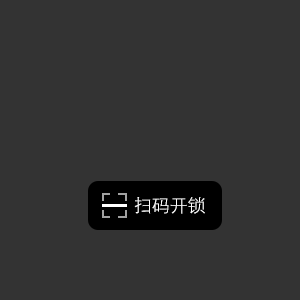
<style>
.page{position:relative;width:300px;height:300px;background:#333333}
.page>*{position:absolute;margin:0}
.t1{font:18px "STXihei";color:#ffffff}
</style>
<div class="page">
<p class="t1" style="left:134px;top:197px;width:71px;height:17px">扫码开锁</p>
</div>
